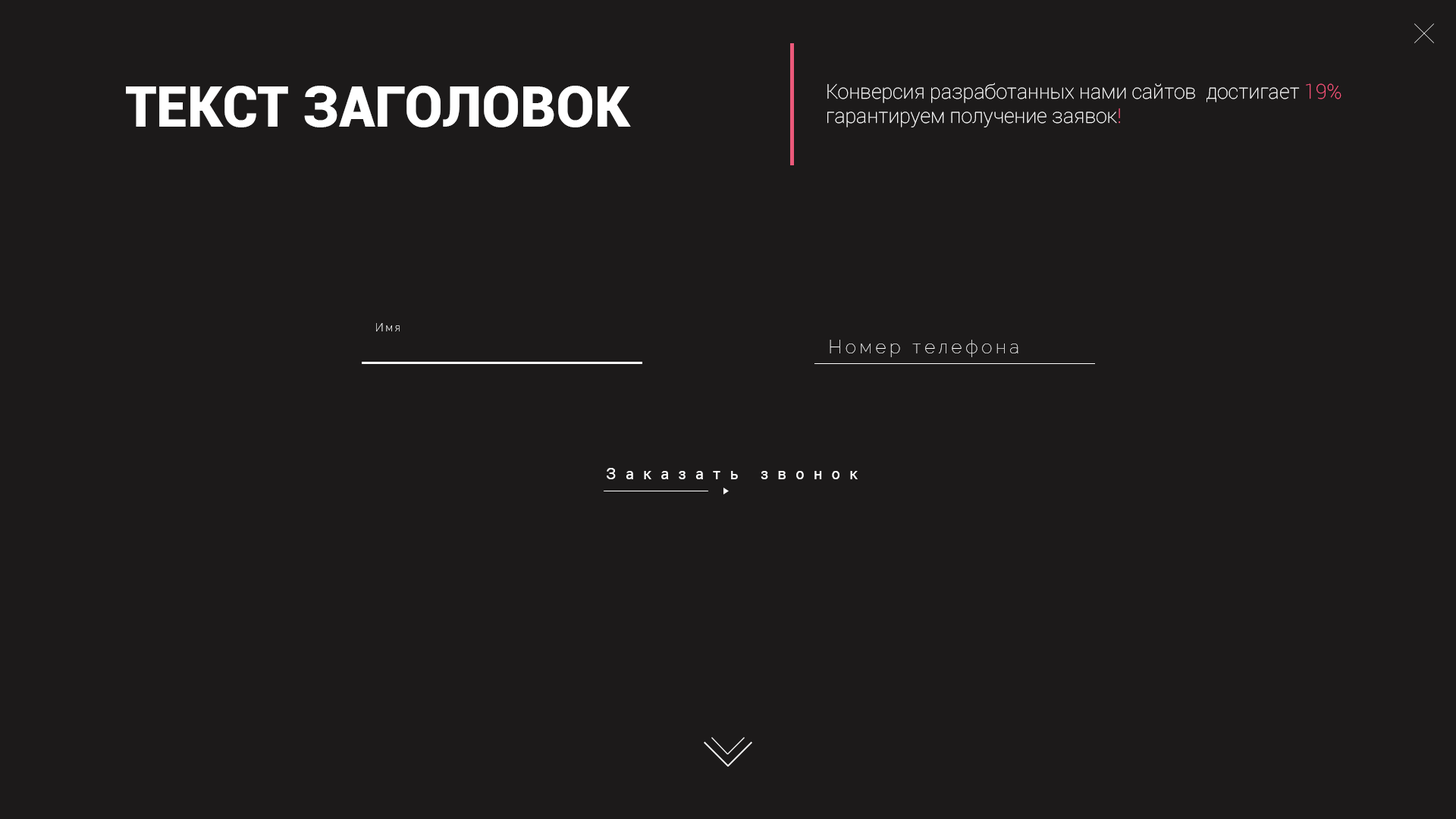
<style>
.page{position:relative;width:1456px;height:819px;background:#1c1a1a}
.page>*{position:absolute;margin:0}
.t1{font:56px "Roboto-Black";color:#ffffff}
.t2{font:20.2px "Roboto-Thin";color:#ffffff}
.t3{font:20.2px "Roboto-Thin";color:#ff557d}
.t4{font:10.7px "Raleway-Thin";letter-spacing:0.2em;color:#ffffff}
.t5{font:18.2px "Raleway-Thin";letter-spacing:0.2em;color:#ffffff}
.t6{font:15.9px "Roboto-Regular";letter-spacing:0.6em;color:#ffffff;scale:0.97 1}
</style>
<div class="page">
<p class="t1" style="left:126px;top:86px;width:505px;height:41px">ТЕКСТ ЗАГОЛОВОК</p>
<p class="t2" style="left:827px;top:83px;width:514px;height:44px">Конверсия разработанных нами сайтов  достигает <span class="t3">19% <br></span>гарантируем получение заявок<span class="t3">!</span></p>
<p class="t4" style="left:376px;top:323px;width:24px;height:8px">Имя</p>
<p class="t5" style="left:830px;top:340px;width:188px;height:17px">Номер телефона</p>
<p class="t6" style="left:607px;top:468px;width:251px;height:11px">Заказать звонок</p>
</div>
